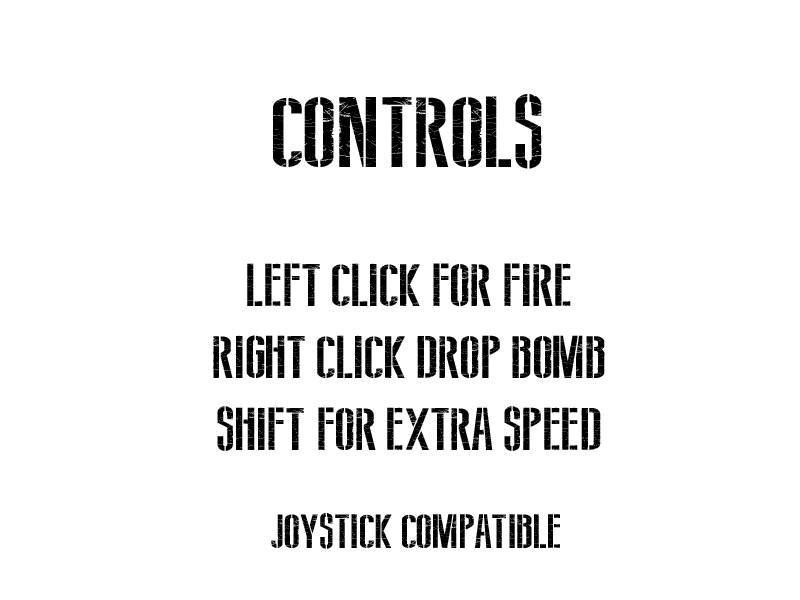
<style>
.page{position:relative;width:800px;height:600px;background:#ffffff}
.page>*{position:absolute;margin:0}
.t1{font:100px "SovietStyle";color:#000000}
.t2{font:60px "SovietStyle";color:#000000}
.t3{font:48px "SovietStyle";color:#000000}
</style>
<div class="page">
<p class="t1" style="left:273px;top:94px;width:269px;height:75px">Controls</p>
<p class="t2" style="left:213px;top:263px;width:392px;height:188px;text-align:center">left click for fire<br>Right Click drop bomb<br>Shift for extra Speed</p>
<p class="t3" style="left:271px;top:513px;width:289px;height:36px">Joystick Compatible</p>
</div>
